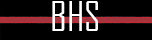
<style>
.page{position:relative;width:152px;height:40px;background:#000000}
.page>*{position:absolute;margin:0}
.t1{font:39.4px "AgencyFB-Reg";color:#ffffff}
</style>
<div class="page">
<p class="t1" style="left:52px;top:1px;width:46px;height:30px">BHS</p>
</div>
